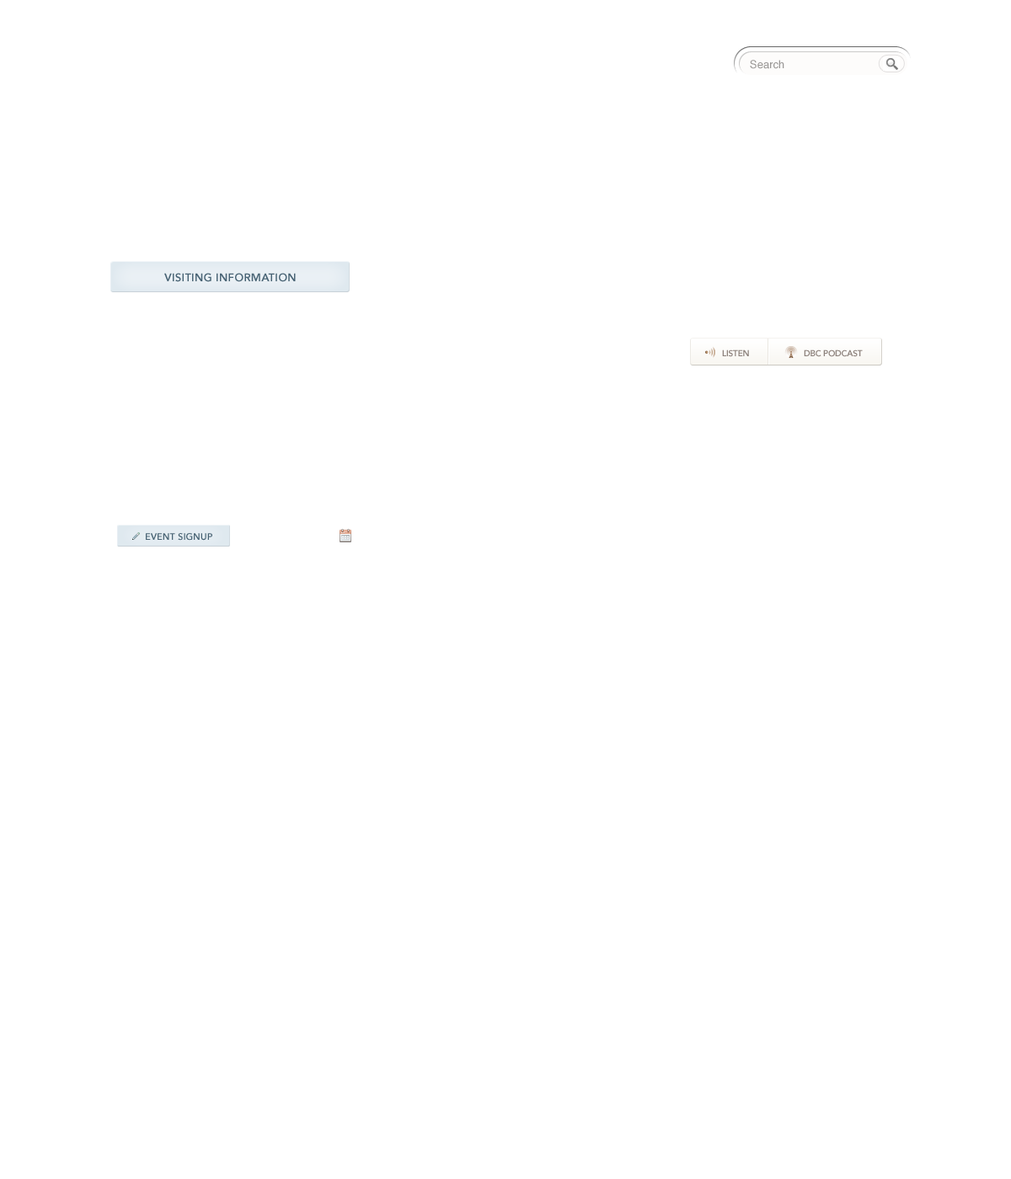
<style>
.page{position:relative;width:1011px;height:1179px;background:#ffffff}
.page>*{position:absolute;margin:0}
.t1{font:11px "Helvetica";color:#999795}
.t2{font:11px "AvenirLTStd-Heavy";letter-spacing:0.02em;color:#486374;text-transform:uppercase}
.t3{font:8.4px "AvenirLTStd-Heavy";letter-spacing:-0.02em;color:#8b807a;text-transform:uppercase}
.t4{font:9.3px "AvenirLTStd-Heavy";color:#486374;text-transform:uppercase}
</style>
<div class="page">
<p class="t1" style="left:750px;top:60px;width:34px;height:9px">Search</p>
<p class="t2" style="left:164px;top:273px;width:132px;height:9px">Visiting Information</p>
<p class="t3" style="left:722px;top:350px;width:27px;height:7px">Listen</p>
<p class="t3" style="left:804px;top:350px;width:59px;height:7px">DBC Podcast</p>
<p class="t4" style="left:146px;top:533px;width:66px;height:8px">Event Signup</p>
</div>
